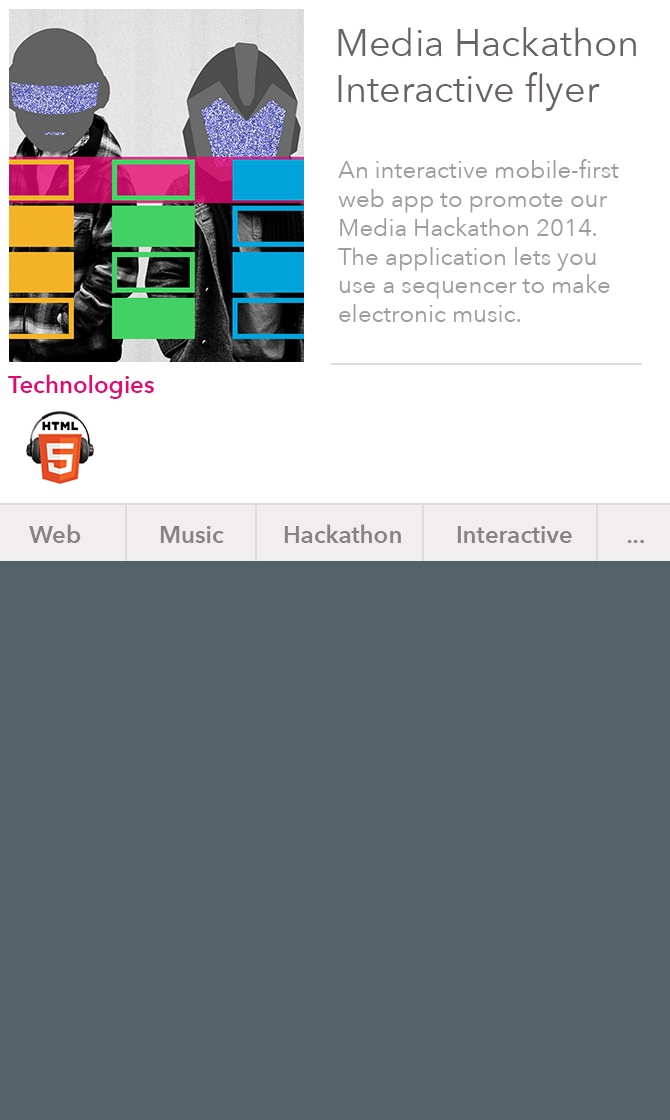
<style>
.page{position:relative;width:670px;height:1120px;background:#536266}
.page>*{position:absolute;margin:0}
.t1{font:38px "AvenirNext-Regular";color:#6a6366}
.t2{font:24px "AvenirNext-Regular";color:#9e9d9e}
.t3{font:24px "AvenirNext-DemiBold";color:#e50874}
.t4{font:24px "AvenirNext-DemiBold";color:#888284}
</style>
<div class="page">
<p class="t1" style="left:338px;top:27px;width:298px;height:84px">Media Hackathon <br>Interactive flyer</p>
<p class="t2" style="left:338px;top:159px;width:281px;height:163px">An interactive mobile-first web app to promote our Media Hackathon 2014. The application lets you use a sequencer to make electronic music.</p>
<p class="t3" style="left:8px;top:374px;width:146px;height:25px">Technologies</p>
<p class="t4" style="left:29px;top:524px;width:52px;height:19px">Web</p>
<p class="t4" style="left:160px;top:526px;width:64px;height:17px">Music</p>
<p class="t4" style="left:284px;top:524px;width:117px;height:19px">Hackathon</p>
<p class="t4" style="left:457px;top:526px;width:115px;height:17px">Interactive</p>
<p class="t4" style="left:627px;top:540px;width:17px;height:3px">...</p>
</div>
